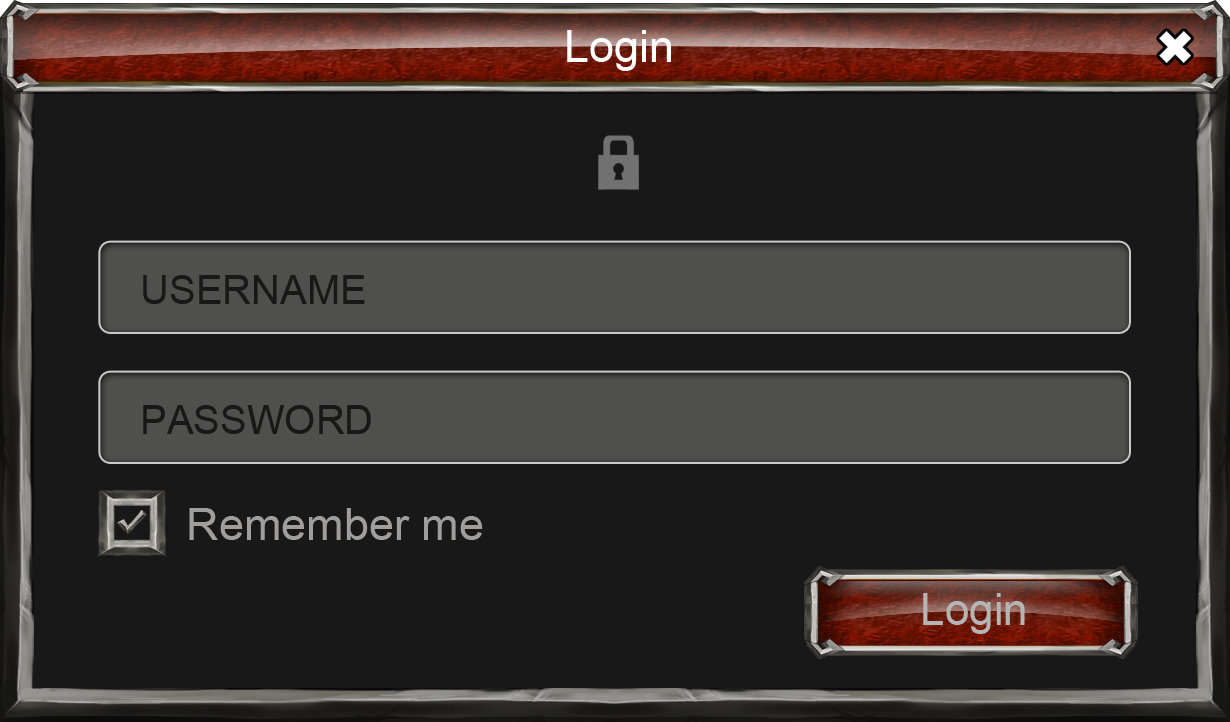
<style>
.page{position:relative;width:1230px;height:722px;background:#181818}
.page>*{position:absolute;margin:0}
.t1{font:45px "ArialMT";color:#ffffff}
.t2{font:40px "ArialMT";color:#181818}
.t3{font:45px "ArialMT";color:#9f9e9c}
.t4{font:44px "ArialMT";color:#b5b5b5}
</style>
<div class="page">
<p class="t1" style="left:567px;top:30px;width:104px;height:41px">Login</p>
<p class="t2" style="left:143px;top:275px;width:222px;height:29px">USERNAME</p>
<p class="t2" style="left:143px;top:405px;width:228px;height:29px">PASSWORD</p>
<p class="t3" style="left:189px;top:508px;width:294px;height:32px">Remember me</p>
<p class="t4" style="left:923px;top:593px;width:102px;height:41px">Login</p>
</div>
